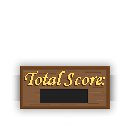
<style>
.page{position:relative;width:128px;height:128px;background:#ffffff}
.page>*{position:absolute;margin:0}
.t1{font:20px "MonotypeCorsiva";color:#ffdf5d}
</style>
<div class="page">
<p class="t1" style="left:25px;top:71px;width:80px;height:15px">Total Score:</p>
</div>
